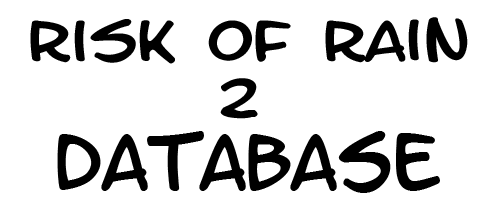
<style>
.page{position:relative;width:500px;height:200px;background:#ffffff}
.page>*{position:absolute;margin:0}
.t1{font:47.6px "LetterOMatic";color:#000000;scale:1.23 1}
.t2{font:66.7px "LetterOMatic";color:#000000}
</style>
<div class="page">
<p class="t1" style="left:30px;top:17px;width:438px;height:102px">Risk Of Rain <br>               2</p>
<p class="t2" style="left:57px;top:131px;width:383px;height:62px">DataBase</p>
</div>
